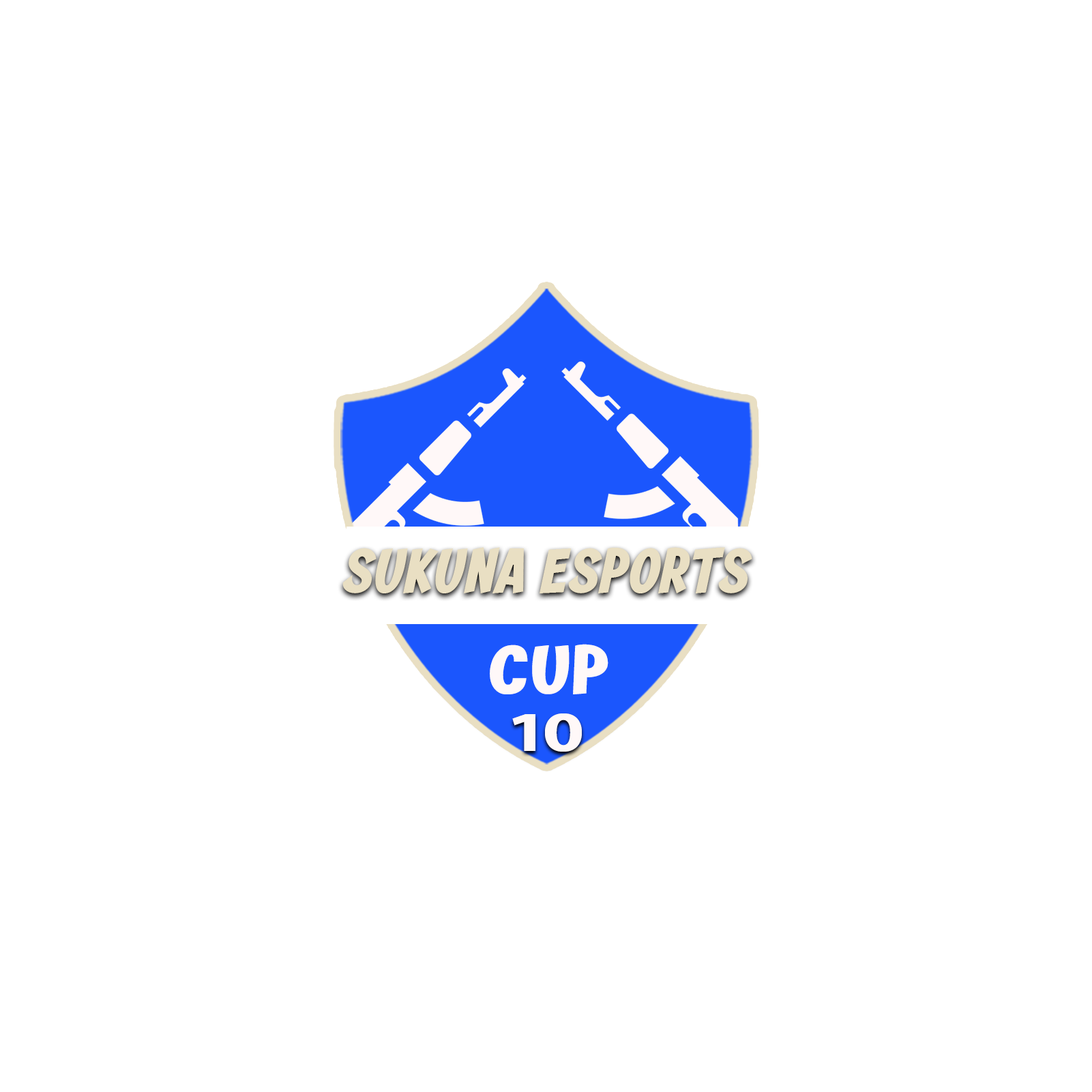
<style>
.page{position:relative;width:1092px;height:1092px;background:#ffffff}
.page>*{position:absolute;margin:0}
.t1{font:62.5px "BRELA-Regular";letter-spacing:-0.005em;color:#e9dfc3;font-style:italic}
.t2{font:68.2px "BRELA-Regular";color:#fff8f8;text-transform:uppercase;scale:1.22 1}
.t3{font:56.2px "MyriadPro-Bold";letter-spacing:-0.075em;color:#fff8f8;text-transform:uppercase;scale:1.36 1}
</style>
<div class="page">
<p class="t1" style="left:342px;top:547px;width:410px;height:46px">SUKUNA ESPORTS</p>
<p class="t2" style="left:490px;top:644px;width:118px;height:50px">cup</p>
<p class="t3" style="left:512px;top:713px;width:70px;height:39px">10</p>
</div>
